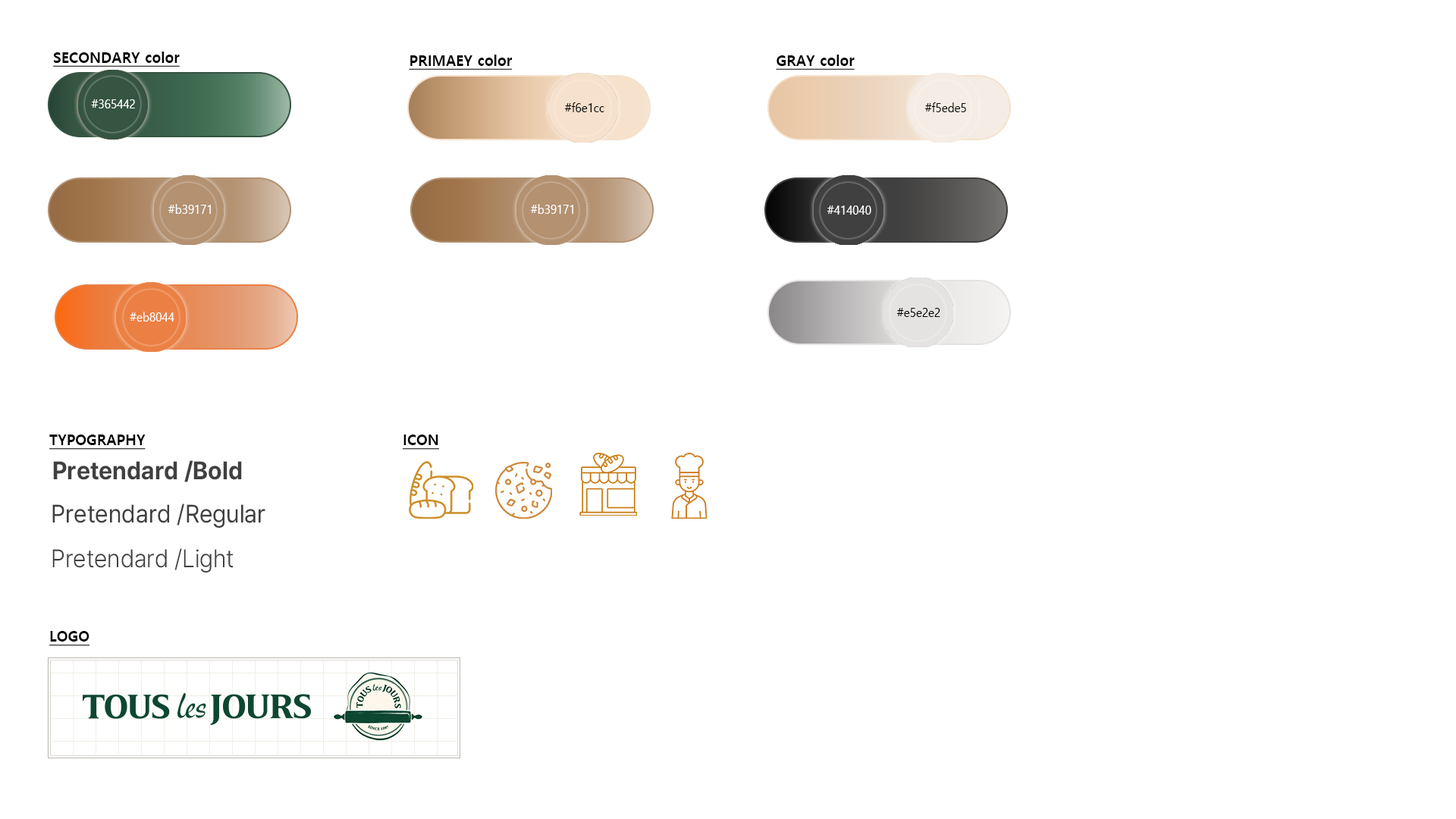
<style>
.page{position:relative;width:1456px;height:819px;background:#ffffff}
.page>*{position:absolute;margin:0}
.t1{font:15.2px "MalgunGothicBold";color:#040404;text-decoration:underline;scale:0.95 1}
.t2{font:11.9px "MalgunGothic";color:#ffffff;scale:0.95 1}
.t3{font:11.9px "MalgunGothic";color:#040404;scale:0.95 1}
.t4{font:11.9px "MalgunGothic";color:#fefefe;scale:0.95 1}
.t5{font:25.1px "Pretendard-Bold";color:#414040;scale:0.95 1}
.t6{font:25.1px "Pretendard-Regular";color:#414040;scale:0.95 1}
.t7{font:25.1px "Pretendard-Light";color:#414040;scale:0.95 1}
</style>
<div class="page">
<p class="t1" style="left:53px;top:52px;width:127px;height:15px">SECONDARY color</p>
<p class="t1" style="left:409px;top:55px;width:104px;height:15px">PRIMAEY color</p>
<p class="t1" style="left:776px;top:55px;width:79px;height:15px">GRAY color</p>
<p class="t2" style="left:91px;top:99px;width:44px;height:9px">#365442</p>
<p class="t3" style="left:564px;top:102px;width:40px;height:10px">#f6e1cc</p>
<p class="t3" style="left:924px;top:102px;width:42px;height:10px">#f5ede5</p>
<p class="t2" style="left:168px;top:204px;width:43px;height:10px">#b39171</p>
<p class="t2" style="left:530px;top:204px;width:43px;height:10px">#b39171</p>
<p class="t2" style="left:827px;top:206px;width:44px;height:9px">#414040</p>
<p class="t4" style="left:130px;top:312px;width:44px;height:10px">#eb8044</p>
<p class="t3" style="left:896px;top:308px;width:44px;height:9px">#e5e2e2</p>
<p class="t1" style="left:49px;top:435px;width:97px;height:15px">TYPOGRAPHY</p>
<p class="t1" style="left:403px;top:435px;width:37px;height:15px">ICON</p>
<p class="t5" style="left:53px;top:460px;width:189px;height:22px">Pretendard /Bold</p>
<p class="t6" style="left:52px;top:504px;width:213px;height:24px">Pretendard /Regular</p>
<p class="t7" style="left:52px;top:548px;width:182px;height:25px">Pretendard /Light</p>
<p class="t1" style="left:49px;top:631px;width:41px;height:15px">LOGO</p>
</div>
